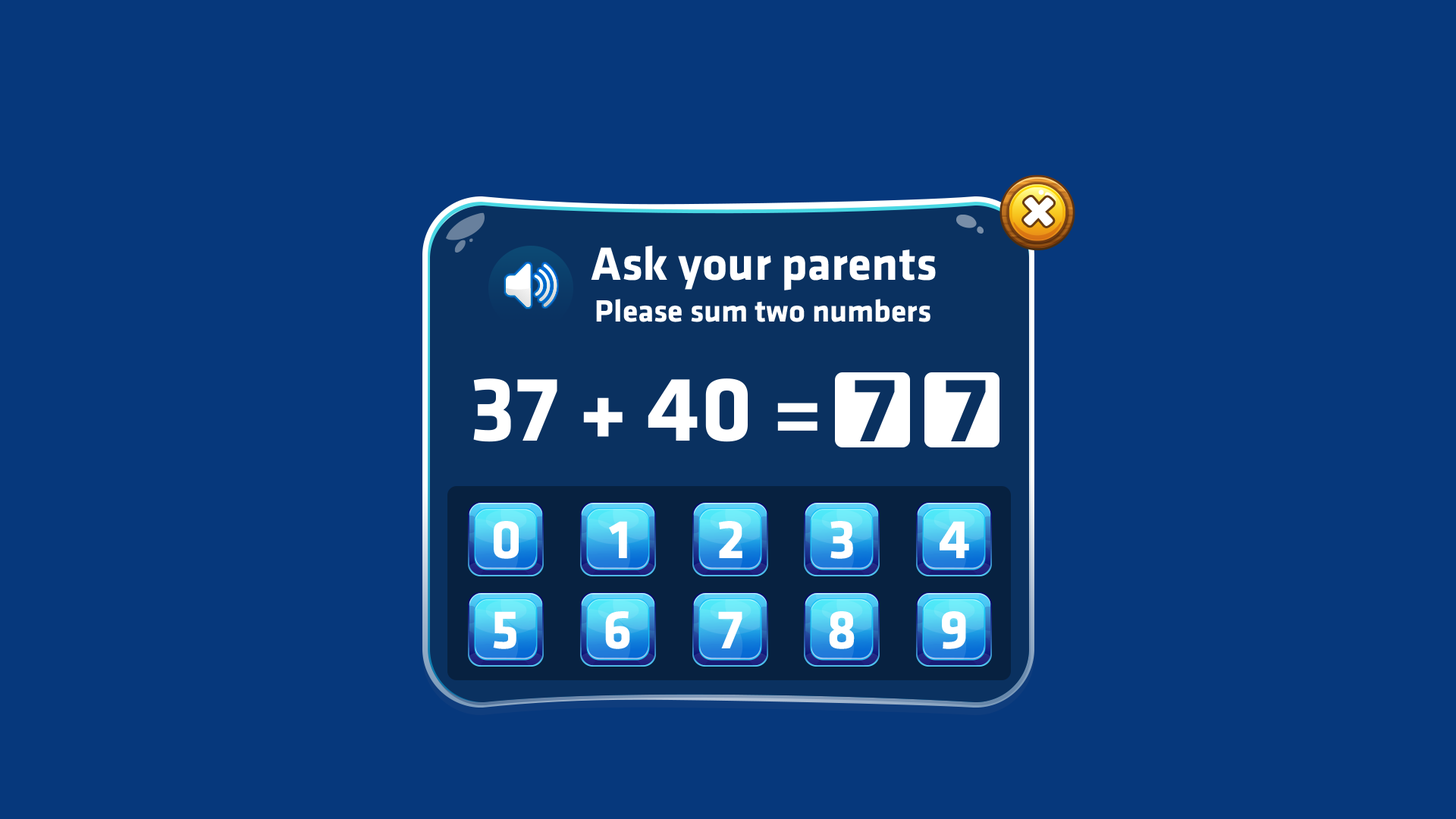
<style>
.page{position:relative;width:1456px;height:819px;background:#06387c}
.page>*{position:absolute;margin:0}
.t1{font:48.5px "UTMFacebookK&TBold";color:#ffffff}
.t2{font:31.9px "UTMFacebookK&TBold";color:#ffffff}
.t3{font:94.6px "UTMFacebookK&TBold";color:#ffffff}
.t4{font:94.6px "UTMFacebookK&TBold";color:#0a3160}
.t5{font:56.6px "UTMFacebookK&TBold";color:#ffffff}
</style>
<div class="page">
<p class="t1" style="left:591px;top:245px;width:345px;height:45px">Ask your parents</p>
<p class="t2" style="left:596px;top:299px;width:334px;height:23px">Please sum two numbers</p>
<p class="t3" style="left:473px;top:378px;width:344px;height:64px">37 + 40 =</p>
<p class="t4" style="left:855px;top:380px;width:40px;height:61px">7</p>
<p class="t4" style="left:946px;top:380px;width:40px;height:61px">7</p>
<p class="t5" style="left:494px;top:521px;width:25px;height:38px">0</p>
<p class="t5" style="left:609px;top:521px;width:18px;height:37px">1</p>
<p class="t5" style="left:719px;top:521px;width:23px;height:37px">2</p>
<p class="t5" style="left:830px;top:521px;width:23px;height:38px">3</p>
<p class="t5" style="left:940px;top:521px;width:29px;height:37px">4</p>
<p class="t5" style="left:493px;top:611px;width:23px;height:38px">5</p>
<p class="t5" style="left:605px;top:611px;width:25px;height:38px">6</p>
<p class="t5" style="left:718px;top:611px;width:24px;height:37px">7</p>
<p class="t5" style="left:829px;top:611px;width:26px;height:38px">8</p>
<p class="t5" style="left:942px;top:611px;width:24px;height:38px">9</p>
</div>
